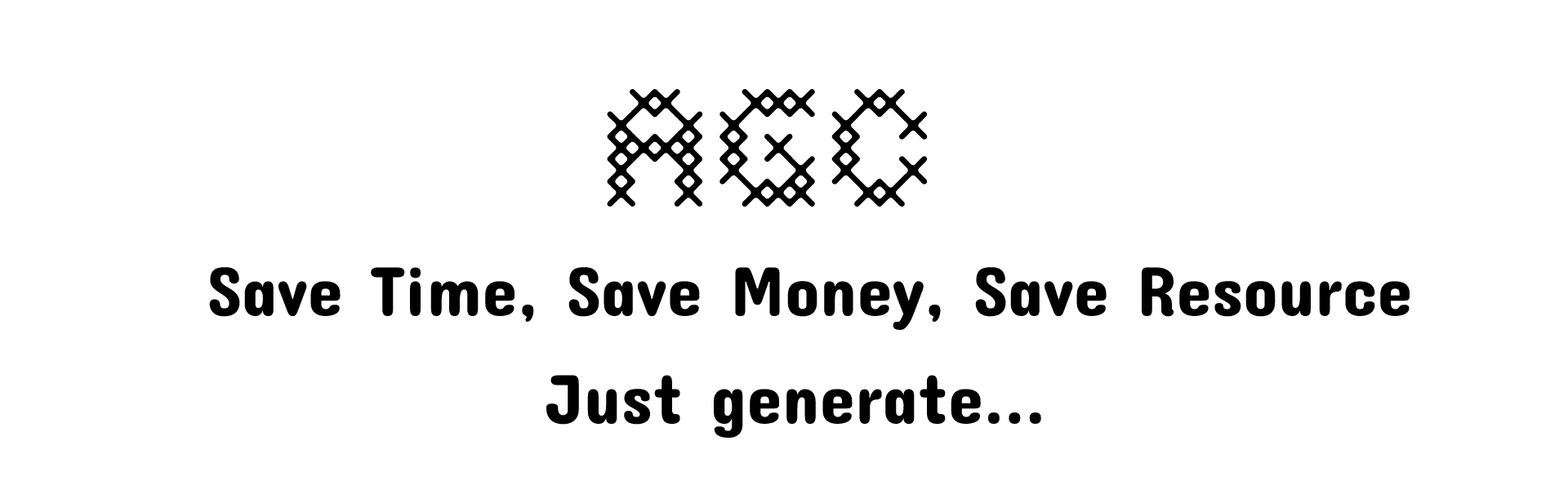
<style>
.page{position:relative;width:1568px;height:490px;background:#ffffff}
.page>*{position:absolute;margin:0}
.t1{font:147px "Costura-Light";color:#000000}
.t2{font:71px "ConcertOne-Regular";color:#000000}
</style>
<div class="page">
<p class="t1" style="left:607px;top:88px;width:321px;height:119px">AGC</p>
<p class="t2" style="left:209px;top:267px;width:1201px;height:63px">Save Time, Save Money, Save Resource</p>
<p class="t2" style="left:546px;top:375px;width:495px;height:63px">Just generate...</p>
</div>
